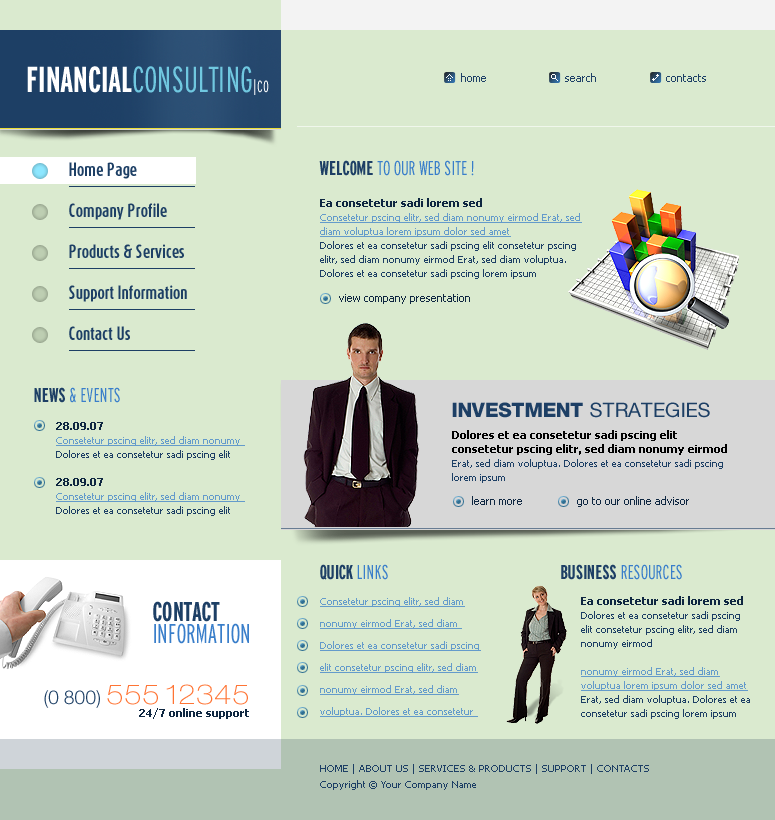
<style>
.page{position:relative;width:775px;height:820px;background:#daeacf}
.page>*{position:absolute;margin:0}
.t1{font:36px "Interstate-LightCompressed";color:#70c8e0}
.t2{font:36px "Interstate-BoldCompressed";color:#ffffff}
.t3{font:16px "Interstate-LightCompressed";color:#ffffff}
.t4{font:11px "Tahoma";color:#1f4167}
.t5{font:20px "Interstate-LightCompressed";color:#397eca}
.t6{font:20px "Interstate-BoldCompressed";color:#1d3f65}
.t7{font:16px "DaxCompact-Bold";color:#1d3f65}
.t8{font:10px/14px "Tahoma";color:#1d3f65}
.t9{font:11px/14px "Tahoma-Bold";color:#0f2741}
.t10{font:10px/14px "Tahoma";color:#649bcb;text-decoration:underline}
.t11{font:11px "Tahoma";color:#0f2741}
.t12{font:20px "HelveticaNeueLTPro-Hv";color:#1d3f65}
.t13{font:20px "HelveticaNeueLTPro-Roman";color:#1d3f65}
.t14{font:11px/14px "Tahoma-Bold";color:#000000}
.t15{font:27px/22.2px "Interstate-LightCompressed";color:#397eca}
.t16{font:27px/22.2px "Interstate-BoldCompressed";color:#1d3f65}
.t17{font:10px/22px "Tahoma";color:#649bcb;text-decoration:underline}
.t18{font:27px "HelveticaNeueLTPro-ThEx";color:#ff7434}
.t19{font:19px "HelveticaNeueLTPro-Lt";color:#1d3f65}
.t20{font:11px "Tahoma-Bold";color:#0f2741}
.t21{font:10px/16px "Tahoma";color:#1d3f65}
</style>
<div class="page">
<p class="t1" style="left:27px;top:66px;width:242px;height:29px"><span class="t2">FINANCIAL</span>CONSULTING<span class="t3">|CO</span></p>
<p class="t4" style="left:461px;top:73px;width:25px;height:9px">home</p>
<p class="t4" style="left:565px;top:73px;width:31px;height:9px">search</p>
<p class="t4" style="left:666px;top:74px;width:40px;height:8px">contacts</p>
<p class="t5" style="left:319px;top:160px;width:155px;height:16px"><span class="t6">WELCOME </span>TO OUR WEB SITE !</p>
<p class="t7" style="left:69px;top:162px;width:68px;height:17px">Home Page</p>
<p class="t8" style="left:320px;top:198px;width:262px;height:81px"><span class="t9">Ea consetetur sadi lorem sed <br></span><span class="t10">Consetetur pscing elitr, sed diam nonumy eirmod Erat, sed diam voluptua lorem ipsum dolor sed amet<br></span>Dolores et ea consetetur sadi pscing elit consetetur pscing elitr, sed diam nonumy eirmod Erat, sed diam voluptua. Dolores et ea consetetur sadi pscing lorem ipsum</p>
<p class="t7" style="left:69px;top:203px;width:98px;height:17px">Company Profile</p>
<p class="t7" style="left:69px;top:244px;width:115px;height:14px">Products &amp; Services</p>
<p class="t7" style="left:69px;top:285px;width:118px;height:17px">Support Information</p>
<p class="t11" style="left:339px;top:294px;width:131px;height:10px">view company presentation</p>
<p class="t7" style="left:69px;top:326px;width:61px;height:14px">Contact Us</p>
<p class="t5" style="left:34px;top:387px;width:86px;height:16px"><span class="t6">NEWS </span>&amp; EVENTS</p>
<p class="t12" style="left:452px;top:402px;width:258px;height:16px">INVESTMENT <span class="t13">STRATEGIES</span></p>
<p class="t8" style="left:56px;top:422px;width:189px;height:94px"><span class="t9">28.09.07<br></span><span class="t10">Consetetur pscing elitr, sed diam nonumy <br></span>Dolores et ea consetetur sadi pscing elit <br><br><span class="t9">28.09.07<br></span><span class="t10">Consetetur pscing elitr, sed diam nonumy <br></span>Dolores et ea consetetur sadi pscing elit</p>
<p class="t14" style="left:452px;top:430px;width:275px;height:53px">Dolores et ea consetetur sadi pscing elit consetetur pscing elitr, sed diam nonumy eirmod<span class="t8"> Erat, sed diam voluptua. Dolores et ea consetetur sadi pscing lorem ipsum</span></p>
<p class="t11" style="left:472px;top:496px;width:50px;height:9px">learn more</p>
<p class="t11" style="left:577px;top:496px;width:112px;height:11px">go to our online advisor</p>
<p class="t6" style="left:320px;top:564px;width:68px;height:16px">QUICK <span class="t5">LINKS</span></p>
<p class="t5" style="left:561px;top:564px;width:121px;height:16px"><span class="t6">BUSINESS </span>RESOURCES</p>
<p class="t15" style="left:153px;top:601px;width:96px;height:43px"><span class="t16">CONTACT <br></span>INFORMATION</p>
<p class="t17" style="left:320px;top:597px;width:161px;height:120px">Consetetur pscing elitr, sed diam nonumy eirmod Erat, sed diam <br>Dolores et ea consetetur sadi pscing elit consetetur pscing elitr, sed diam nonumy eirmod Erat, sed diam voluptua. Dolores et ea consetetur</p>
<p class="t8" style="left:581px;top:596px;width:169px;height:123px"><span class="t9">Ea consetetur sadi lorem sed <br></span>Dolores et ea consetetur sadi pscing elit consetetur pscing elitr, sed diam nonumy eirmod<br><span class="t10"><br>nonumy eirmod Erat, sed diam voluptua lorem ipsum dolor sed amet<br></span>Erat, sed diam voluptua. Dolores et ea consetetur sadi pscing lorem ipsum</p>
<p class="t18" style="left:44px;top:684px;width:204px;height:24px"><span class="t19">(0 800) </span>555 12345</p>
<p class="t20" style="left:139px;top:708px;width:110px;height:11px">24/7 online support</p>
<p class="t21" style="left:320px;top:764px;width:329px;height:26px">HOME | ABOUT US | SERVICES &amp; PRODUCTS | SUPPORT | CONTACTS<br>Copyright © Your Company Name</p>
</div>
